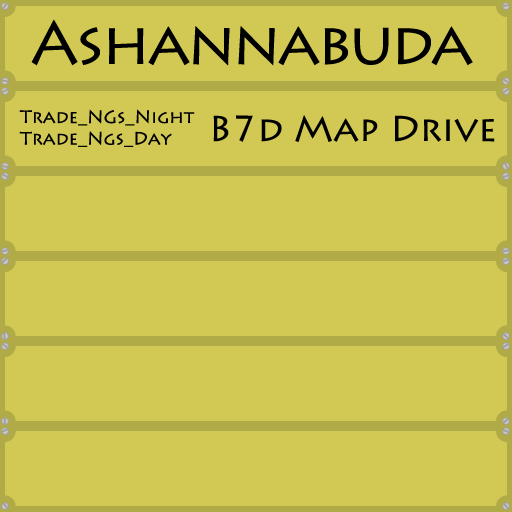
<style>
.page{position:relative;width:512px;height:512px;background:#d1c954}
.page>*{position:absolute;margin:0}
.t1{font:60px "LithosPro-Regular";letter-spacing:-0.05em;color:#000000}
.t2{font:18px "LithosPro-Regular";color:#000000}
.t3{font:36px "LithosPro-Regular";color:#000000}
</style>
<div class="page">
<p class="t1" style="left:31px;top:19px;width:442px;height:47px">Ashannabuda</p>
<p class="t2" style="left:19px;top:109px;width:176px;height:38px">Trade_NGs_Night<br>Trade_Ngs_Day</p>
<p class="t3" style="left:213px;top:115px;width:282px;height:28px">B7d Map Drive</p>
</div>
